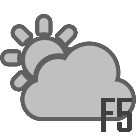
<style>
.page{position:relative;width:136px;height:136px;background:#ffffff}
.page>*{position:absolute;margin:0}
.t1{font:48px "Reckoner";color:#404040;font-weight:bold}
</style>
<div class="page">
<p class="t1" style="left:101px;top:98px;width:31px;height:34px">F5</p>
</div>
